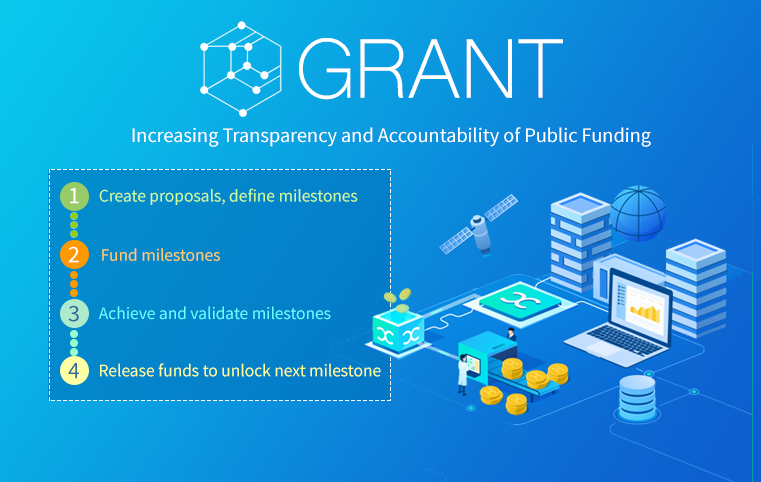
<style>
.page{position:relative;width:761px;height:482px}
.page>*{position:absolute;margin:0}
.t1{font:79.3px "ShreeDev0714";color:#ffffff}
.t2{font:20.5px "SourceSansPro-Regular";color:#ffffff}
.t3{font:24px "SourceSansPro-Regular";color:#ffffff}
.t4{font:17.5px "SourceSansPro-Regular";color:#ccff99}
.t5{font:17.5px "SourceSansPro-Regular";color:#ffcc66}
.t6{font:24px "SourceSansPro-Regular";color:#336699}
.t7{font:17.5px "SourceSansPro-Regular";color:#66ffff}
.t8{font:17.5px "SourceSansPro-Regular";color:#ffff99}
</style>
<div class="page">
<p class="t1" style="left:299px;top:38px;width:264px;height:62px">GRANT</p>
<p class="t2" style="left:132px;top:127px;width:519px;height:20px">Increasing Transparency and Accountability of Public Funding</p>
<p class="t3" style="left:70px;top:188px;width:9px;height:16px">1</p>
<p class="t4" style="left:99px;top:188px;width:259px;height:17px">Create proposals, define milestones</p>
<p class="t3" style="left:68px;top:246px;width:11px;height:17px">2</p>
<p class="t5" style="left:102px;top:248px;width:118px;height:13px">Fund milestones</p>
<p class="t6" style="left:68px;top:305px;width:11px;height:17px">3</p>
<p class="t7" style="left:98px;top:306px;width:233px;height:14px">Achieve and validate milestones</p>
<p class="t6" style="left:68px;top:363px;width:11px;height:16px">4</p>
<p class="t8" style="left:100px;top:363px;width:281px;height:14px">Release funds to unlock next milestone</p>
</div>
